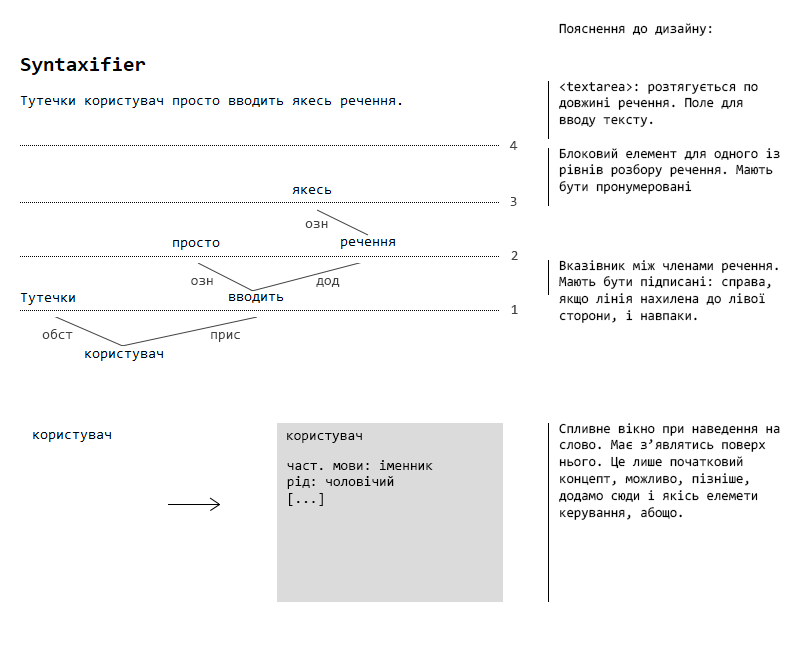
<style>
.page{position:relative;width:800px;height:651px;background:#ffffff}
.page>*{position:absolute;margin:0}
.t1{font:14px "Consolas";color:#000000;scale:0.96 1}
.t2{font:14px "Consolas";color:#424242}
.t3{font:14px "Consolas";color:#000000}
</style>
<div class="page">
<p class="t1" style="left:559px;top:23px;width:153px;height:13px">Пояснення до дизайну:</p>
<p class="t1" style="left:559px;top:81px;width:199px;height:46px;text-align:right">&lt;textarea&gt;: розтягується по довжині речення. Поле для вводу тексту.</p>
<p class="t2" style="left:509px;top:141px;width:9px;height:9px">4</p>
<p class="t1" style="left:559px;top:148px;width:221px;height:46px;text-align:right">Блоковий елемент для одного із рівнів розбору речення. Мають бути пронумеровані</p>
<p class="t2" style="left:510px;top:197px;width:7px;height:9px">3</p>
<p class="t2" style="left:305px;top:221px;width:23px;height:7px">озн</p>
<p class="t2" style="left:511px;top:251px;width:7px;height:9px">2</p>
<p class="t1" style="left:559px;top:260px;width:219px;height:63px;text-align:right">Вказівник між членами речення. Мають бути підписані: справа, якщо лінія нахилена до лівої сторони, і навпаки.</p>
<p class="t2" style="left:191px;top:278px;width:22px;height:7px">озн</p>
<p class="t2" style="left:316px;top:278px;width:24px;height:9px">дод</p>
<p class="t2" style="left:511px;top:305px;width:7px;height:9px">1</p>
<p class="t2" style="left:42px;top:329px;width:31px;height:10px">обст</p>
<p class="t2" style="left:211px;top:332px;width:29px;height:10px">прис</p>
<p class="t1" style="left:559px;top:423px;width:221px;height:97px;text-align:right">Спливне вікно при наведення на слово. Має з’являтись поверх нього. Це лише початковий концепт, можливо, пізніше, додамо сюди і якісь елемети керування, абощо.</p>
<p class="t3" style="left:287px;top:433px;width:75px;height:10px">користувач</p>
<p class="t3" style="left:287px;top:460px;width:146px;height:46px;text-align:right">част. мови: іменник<br>рід: чоловічий<br>[...]</p>
</div>
